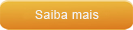
<style>
.page{position:relative;width:133px;height:30px}
.page>*{position:absolute;margin:0}
.t1{font:12px "ArialMT";letter-spacing:0.04em;color:#f2f2f2}
</style>
<div class="page">
<p class="t1" style="left:35px;top:10px;width:64px;height:9px">Saiba mais</p>
</div>
